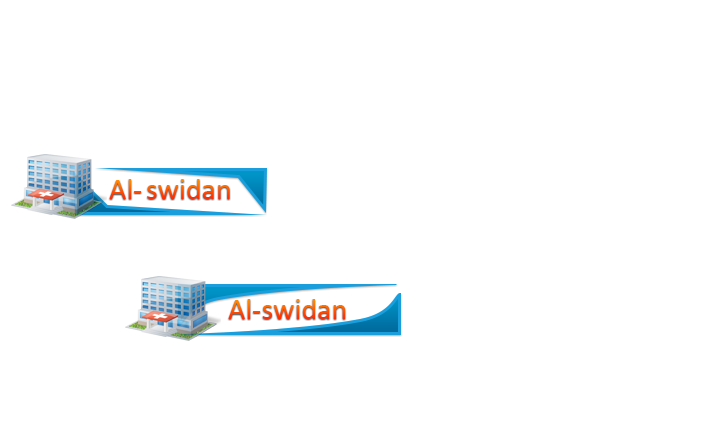
<style>
.page{position:relative;width:709px;height:425px;background:#ffffff}
.page>*{position:absolute;margin:0}
.t1{font:30px "Calibri"}
</style>
<div class="page">
<p class="t1" style="left:109px;top:179px;width:33px;height:20px">Al-</p>
<p class="t1" style="left:147px;top:179px;width:83px;height:20px">swidan</p>
<p class="t1" style="left:228px;top:299px;width:118px;height:20px">Al-swidan</p>
</div>
